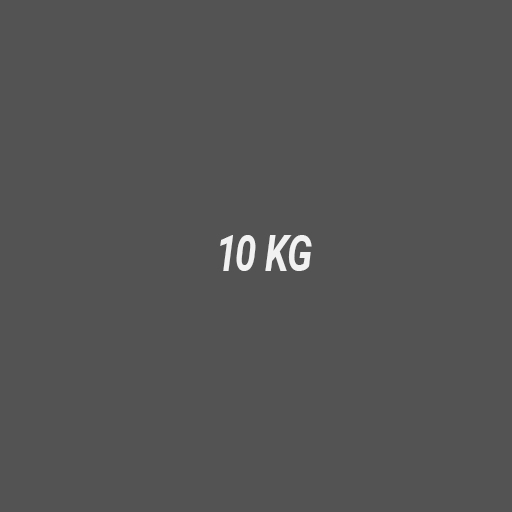
<style>
.page{position:relative;width:512px;height:512px;background:#535353}
.page>*{position:absolute;margin:0}
.t1{font:50px "Roboto-BoldItalic";color:#f1f1f1;scale:0.75 1}
</style>
<div class="page">
<p class="t1" style="left:220px;top:235px;width:92px;height:36px">10 KG</p>
</div>
